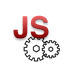
<style>
.page{position:relative;width:75px;height:75px;background:#ffffff}
.page>*{position:absolute;margin:0}
.t1{font:30px "Helvetica-Bold"}
</style>
<div class="page">
<p class="t1" style="left:13px;top:15px;width:36px;height:24px">JS</p>
</div>
